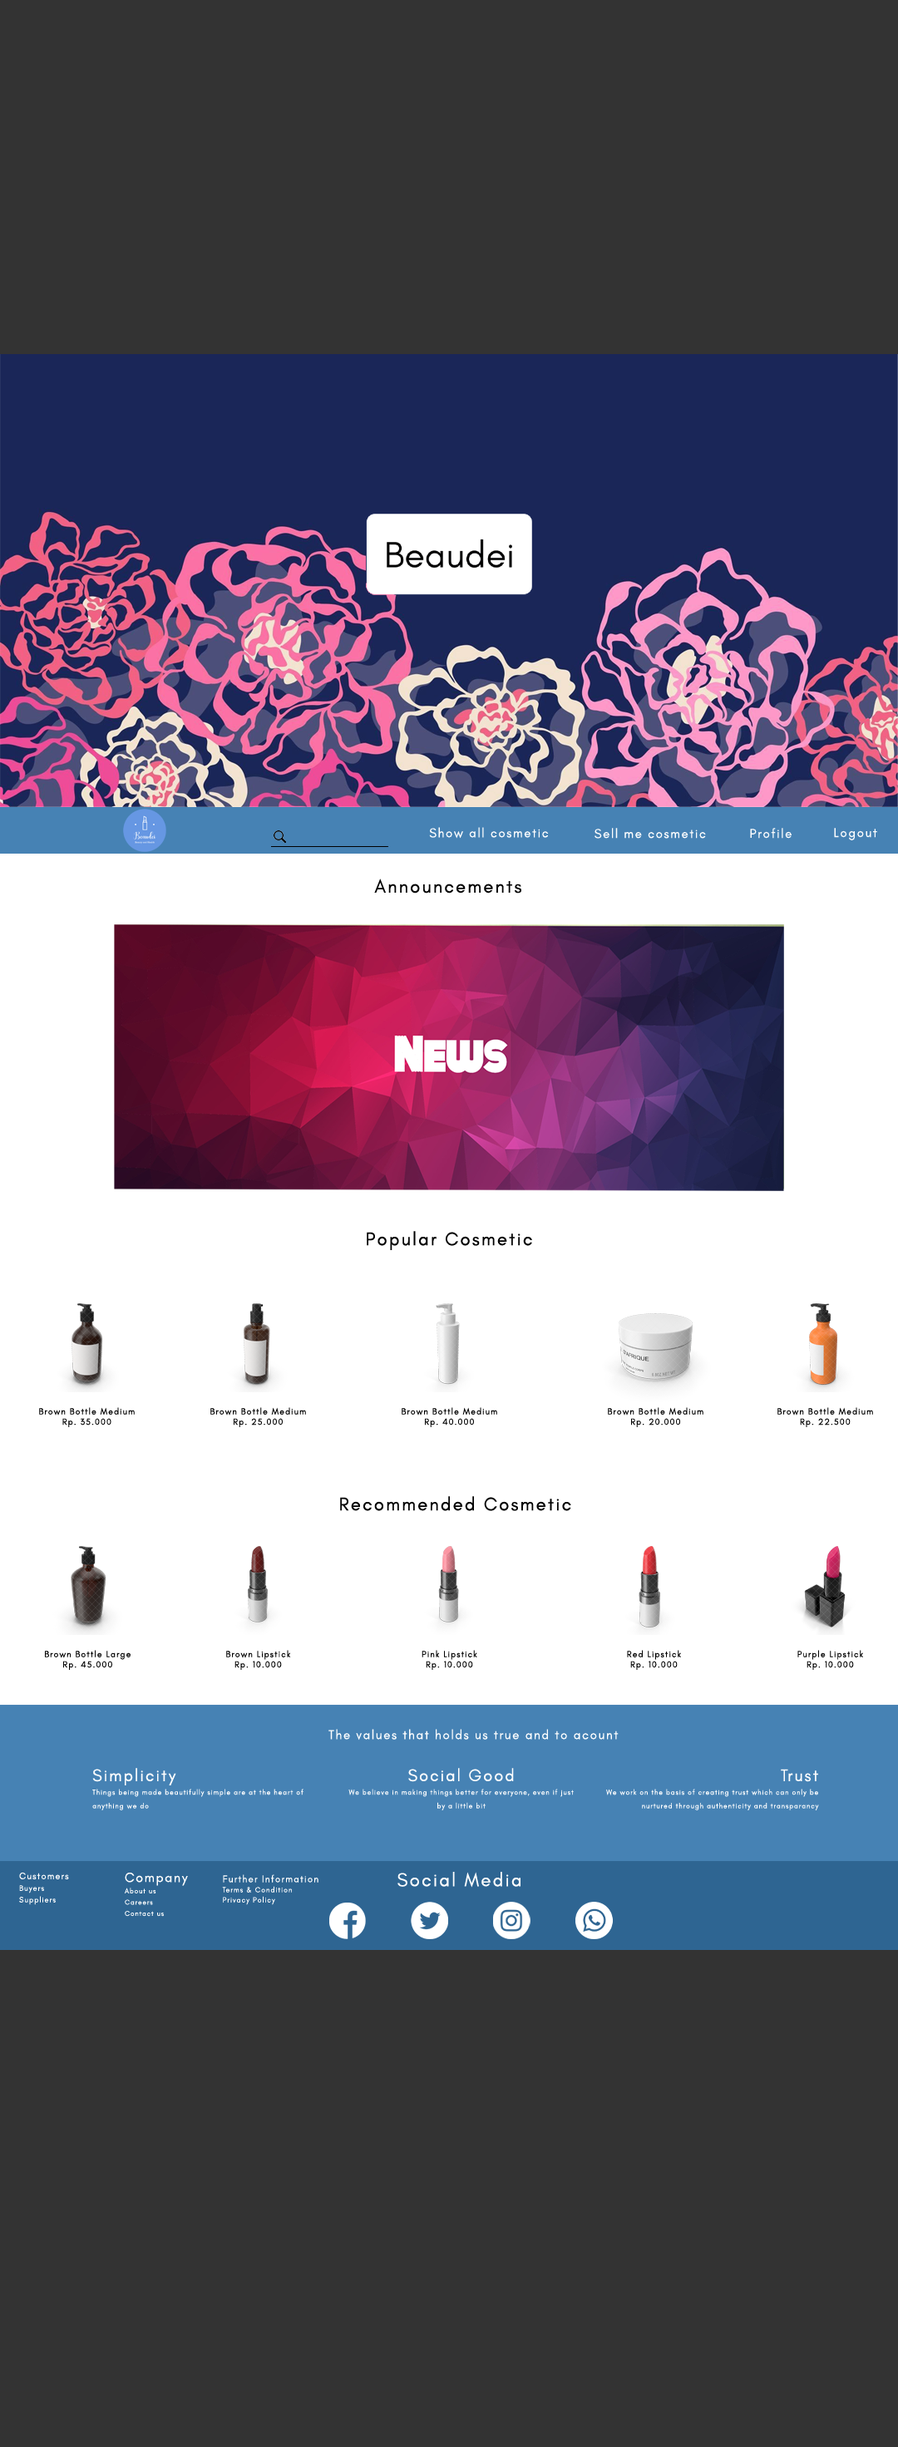
<style>
.page{position:relative;width:898px;height:2447px;background:#333333}
.page>*{position:absolute;margin:0}
.t1{font:13px "GlacialIndifference-Regular";letter-spacing:0.1em;color:#ffffff}
.t2{font:18.7px "GlacialIndifference-Regular";letter-spacing:0.1em;color:#000000}
.t3{font:9px/10.3px "GlacialIndifference-Regular";letter-spacing:0.1em;color:#000000}
.t4{font:7.3px/13.6px "GlacialIndifference-Regular";letter-spacing:0.1em;color:#ffffff}
.t5{font:17px/13.6px "GlacialIndifference-Regular";letter-spacing:0.1em;color:#ffffff}
.t6{font:7.9px/11.6px "GlacialIndifference-Regular";letter-spacing:0.1em;color:#ffffff}
.t7{font:9.5px/16.2px "GlacialIndifference-Regular";letter-spacing:0.1em;color:#ffffff}
.t8{font:7.1px/11.3px "GlacialIndifference-Regular";letter-spacing:0.1em;color:#ffffff}
.t9{font:13.6px/18.8px "GlacialIndifference-Regular";letter-spacing:0.1em;color:#ffffff}
.t10{font:7.6px/10.1px "GlacialIndifference-Regular";letter-spacing:0.1em;color:#ffffff}
.t11{font:9.8px/17.8px "GlacialIndifference-Regular";letter-spacing:0.1em;color:#ffffff}
.t12{font:18.9px "GlacialIndifference-Regular";letter-spacing:0.1em;color:#ffffff}
</style>
<div class="page">
<p class="t1" style="left:429px;top:827px;width:119px;height:12px">Show all cosmetic</p>
<p class="t1" style="left:594px;top:828px;width:112px;height:11px">Sell me cosmetic</p>
<p class="t1" style="left:750px;top:828px;width:41px;height:11px">Profile</p>
<p class="t1" style="left:834px;top:828px;width:43px;height:12px">Logout</p>
<p class="t2" style="left:374px;top:878px;width:147px;height:15px">Announcements</p>
<p class="t2" style="left:366px;top:1231px;width:166px;height:19px">Popular Cosmetic</p>
<p class="t3" style="left:39px;top:1407px;width:96px;height:20px;text-align:center">Brown Bottle Medium<br>Rp. 35.000</p>
<p class="t3" style="left:210px;top:1407px;width:96px;height:20px;text-align:center">Brown Bottle Medium<br>Rp. 25.000</p>
<p class="t3" style="left:401px;top:1407px;width:96px;height:20px;text-align:center">Brown Bottle Medium<br>Rp. 40.000</p>
<p class="t3" style="left:607px;top:1407px;width:96px;height:20px;text-align:center">Brown Bottle Medium<br>Rp. 20.000</p>
<p class="t3" style="left:777px;top:1407px;width:96px;height:20px;text-align:center">Brown Bottle Medium<br>Rp. 22.500</p>
<p class="t2" style="left:340px;top:1496px;width:231px;height:15px">Recommended Cosmetic</p>
<p class="t3" style="left:45px;top:1650px;width:85px;height:20px;text-align:center">Brown Bottle Large<br>Rp. 45.000</p>
<p class="t3" style="left:226px;top:1650px;width:65px;height:20px;text-align:center">Brown Lipstick<br>Rp. 10.000</p>
<p class="t3" style="left:421px;top:1650px;width:56px;height:20px;text-align:center">Pink Lipstick<br>Rp. 10.000</p>
<p class="t3" style="left:627px;top:1650px;width:54px;height:20px;text-align:center">Red Lipstick<br>Rp. 10.000</p>
<p class="t3" style="left:797px;top:1650px;width:66px;height:20px;text-align:center">Purple Lipstick<br>Rp. 10.000</p>
<p class="t1" style="left:328px;top:1729px;width:290px;height:11px">The values that holds us true and to acount</p>
<p class="t4" style="left:92px;top:1768px;width:211px;height:42px"><span class="t5">Simplicity<br></span>Things being made beautifully simple are at the heart of<br>anything we do</p>
<p class="t4" style="left:348px;top:1768px;width:225px;height:42px;text-align:center"><span class="t5">Social Good<br></span>We believe in making things better for everyone, even if just<br>by a little bit</p>
<p class="t4" style="left:606px;top:1768px;width:213px;height:42px;text-align:right"><span class="t5">Trust<br></span>We work on the basis of creating trust which can only be<br>nurtured through authenticity and transparancy</p>
<p class="t6" style="left:19px;top:1872px;width:50px;height:33px"><span class="t7">Customers<br></span>Buyers<br>Suppliers</p>
<p class="t8" style="left:125px;top:1872px;width:63px;height:44px"><span class="t9">Company<br></span>About us<br>Careers<br>Contact us</p>
<p class="t10" style="left:222px;top:1874px;width:96px;height:31px"><span class="t11">Further Information<br></span>Terms &amp; Condition<br>Privacy Policy</p>
<p class="t12" style="left:397px;top:1872px;width:123px;height:15px">Social Media</p>
</div>
